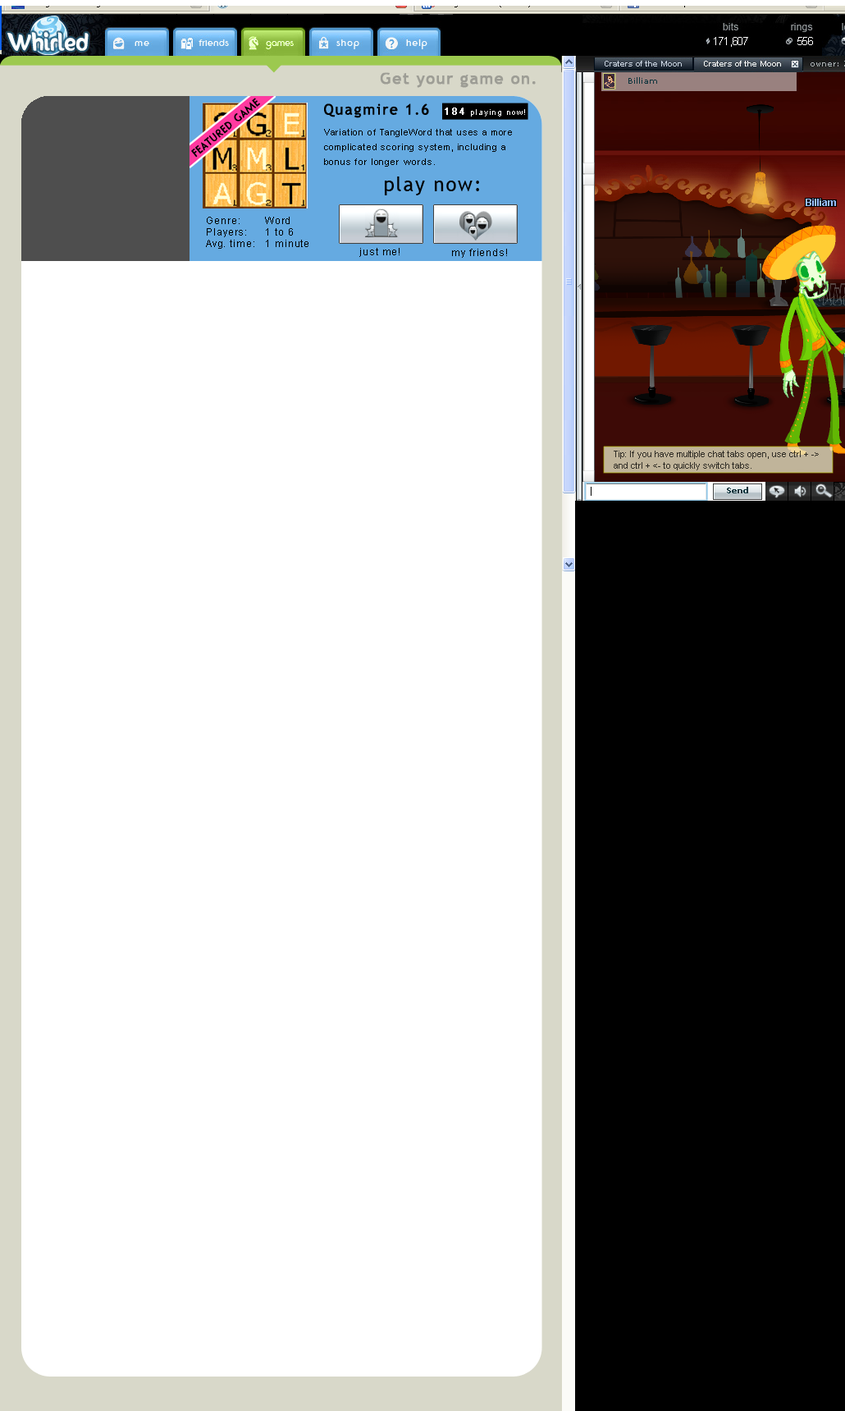
<style>
.page{position:relative;width:845px;height:1411px;background:#ffffff}
.page>*{position:absolute;margin:0}
.t1{font:16.1px "TrebuchetMS";letter-spacing:0.05em;color:#9d9d95;font-weight:bold}
.t2{font:10.5px "BlippoLightSF";letter-spacing:0.075em;color:#000000;font-weight:bold}
.t3{font:14.5px "TrebuchetMS";letter-spacing:0.075em;color:#000000;font-weight:bold}
.t4{font:8px "ArialMT";letter-spacing:0.075em;color:#ffffff}
.t5{font:9.7px "ArialMT";letter-spacing:0.075em;color:#ffffff;font-weight:bold}
.t6{font:8.8px/14.8px "ArialMT";letter-spacing:0.075em;color:#000000}
.t7{font:19.3px "TrebuchetMS";letter-spacing:0.075em;color:#000000}
.t8{font:9.7px "ArialMT";letter-spacing:0.075em;color:#000000}
</style>
<div class="page">
<p class="t1" style="left:380px;top:72px;width:156px;height:16px">Get your game on.</p>
<p class="t2" style="left:191px;top:98px;width:69px;height:60px;rotate:-40deg">FEATURED GAME</p>
<p class="t3" style="left:324px;top:103px;width:105px;height:15px">Quagmire 1.6</p>
<p class="t4" style="left:445px;top:108px;width:80px;height:9px"><span class="t5">184 </span>playing now!</p>
<p class="t6" style="left:324px;top:129px;width:188px;height:38px">Variation of TangleWord that uses a more complicated scoring system, including a bonus for longer words.</p>
<p class="t7" style="left:385px;top:176px;width:94px;height:19px">play now:</p>
<p class="t8" style="left:206px;top:217px;width:103px;height:32px">Genre: Word<br>Players: 1 to 6<br>Avg. time: 1 minute</p>
<p class="t8" style="left:359px;top:248px;width:41px;height:9px">just me!</p>
<p class="t8" style="left:452px;top:249px;width:55px;height:9px">my friends!</p>
</div>
